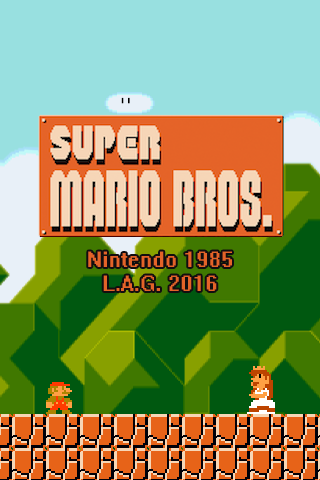
<style>
.page{position:relative;width:320px;height:480px;background:#98e0e0}
.page>*{position:absolute;margin:0}
.t1{font:20px "System";color:#e46328}
</style>
<div class="page">
<p class="t1" style="left:88px;top:251px;width:144px;height:40px;text-align:center">Nintendo 1985 <br>L.A.G. 2016</p>
</div>
